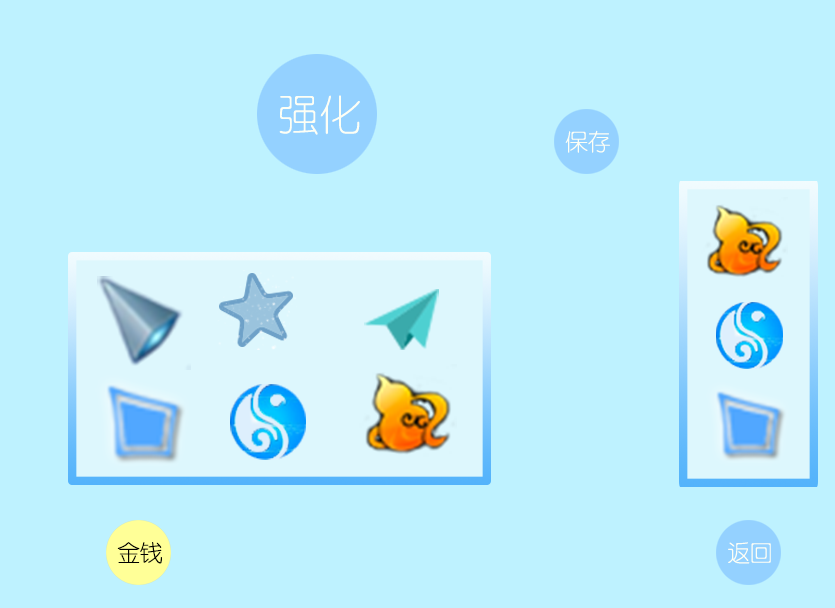
<style>
.page{position:relative;width:835px;height:608px;background:#bef2ff}
.page>*{position:absolute;margin:0}
.t1{font:41.7px "FZY1JW--GB1-0";color:#fdfff5}
.t2{font:22.6px "FZY1JW--GB1-0";color:#fdfff5}
.t3{font:22.6px "FZY1JW--GB1-0";color:#000000}
</style>
<div class="page">
<p class="t1" style="left:279px;top:95px;width:81px;height:40px">强化</p>
<p class="t2" style="left:565px;top:130px;width:45px;height:23px">保存</p>
<p class="t3" style="left:117px;top:542px;width:45px;height:22px">金钱</p>
<p class="t2" style="left:728px;top:542px;width:43px;height:22px">返回</p>
</div>
